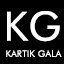
<style>
.page{position:relative;width:64px;height:64px;background:#000000}
.page>*{position:absolute;margin:0}
.t1{font:40px "FuturaBT-Book";color:#ffffff;font-weight:bold}
.t2{font:9px "FuturaBT-Book";color:#ffffff;font-weight:bold}
</style>
<div class="page">
<p class="t1" style="left:7px;top:11px;width:53px;height:31px">KG</p>
<p class="t2" style="left:6px;top:50px;width:56px;height:7px">KARTIK GALA</p>
</div>
